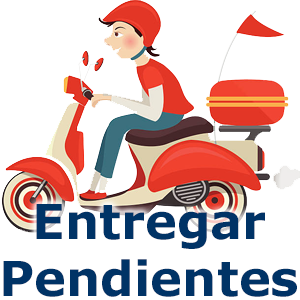
<style>
.page{position:relative;width:300px;height:300px;background:#ffffff}
.page>*{position:absolute;margin:0}
.t1{font:48.2px "Verdana-Bold";color:#003366}
</style>
<div class="page">
<p class="t1" style="left:3px;top:204px;width:294px;height:93px;text-align:center">Entregar<br>Pendientes</p>
</div>
